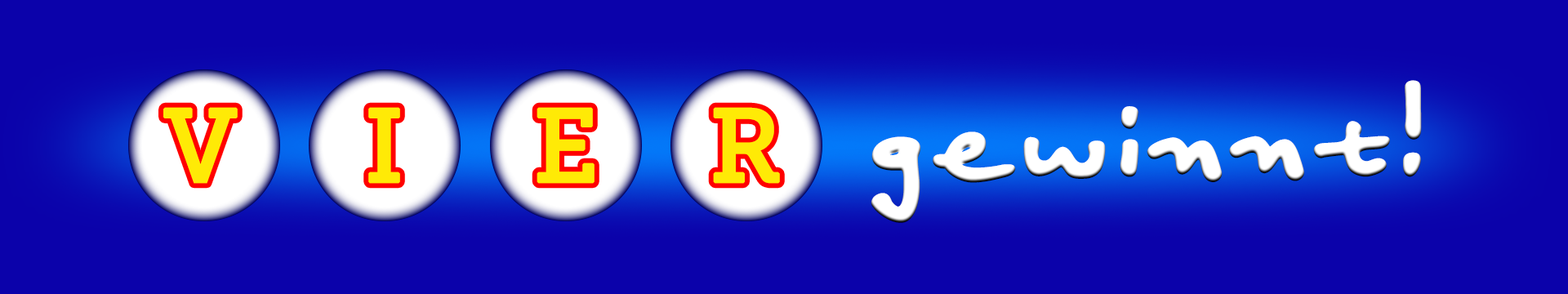
<style>
.page{position:relative;width:1568px;height:294px;background:#0b02aa}
.page>*{position:absolute;margin:0}
.t1{font:153.7px "FeltTipSenior";letter-spacing:0.01em;color:#ffffff;font-weight:bold}
.t2{font:102.9px "MuseoSlab-500";letter-spacing:0.01em;color:#ffea06;font-weight:bold}
</style>
<div class="page">
<p class="t1" style="left:871px;top:80px;width:551px;height:143px;rotate:-1deg">gewinnt!</p>
<p class="t2" style="left:163px;top:107px;width:75px;height:77px">V</p>
<p class="t2" style="left:368px;top:107px;width:32px;height:77px">I</p>
<p class="t2" style="left:537px;top:107px;width:58px;height:77px">E</p>
<p class="t2" style="left:713px;top:107px;width:67px;height:77px">R</p>
</div>
